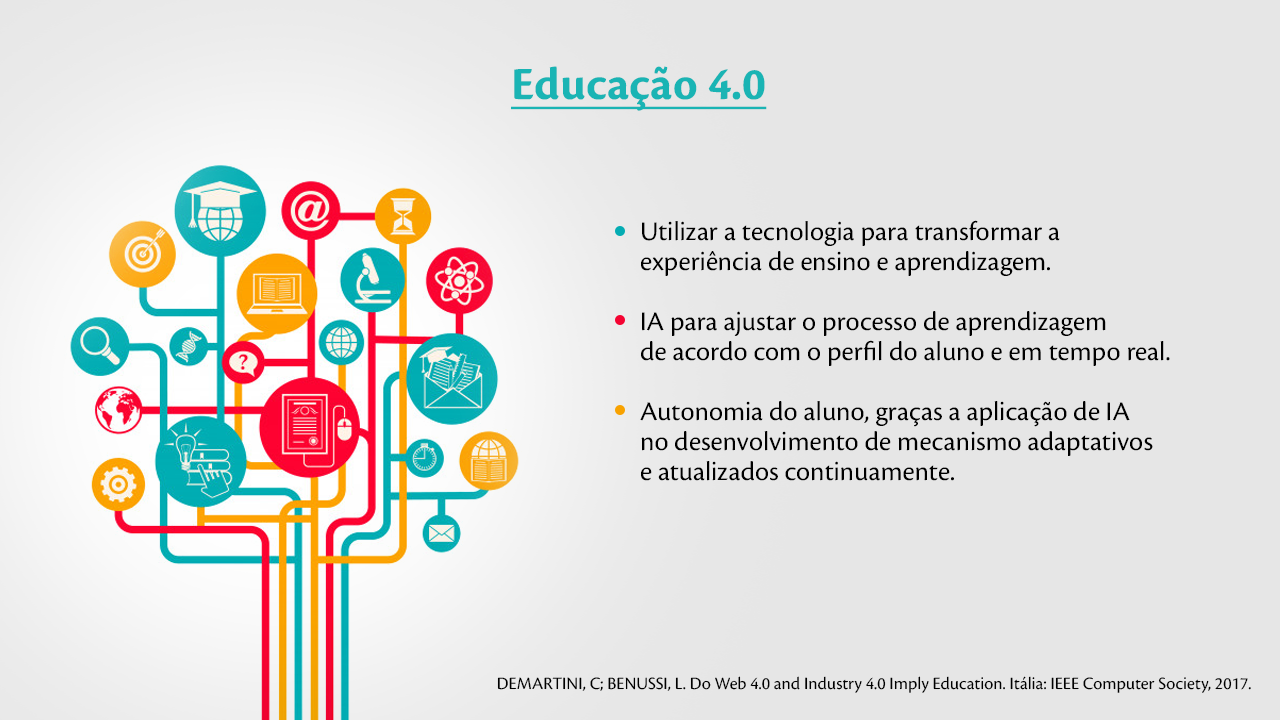
<style>
.page{position:relative;width:1280px;height:720px;background:#e6e6e6}
.page>*{position:absolute;margin:0}
.t1{font:48px "CronosPro-Bold";color:#1ab4b4;text-decoration:underline}
.t2{font:28px/30px "CronosPro-Regular";color:#000000}
.t3{font:18px "CronosPro-Regular";color:#000000}
</style>
<div class="page">
<p class="t1" style="left:511px;top:66px;width:256px;height:45px">Educação 4.0</p>
<p class="t2" style="left:640px;top:220px;width:530px;height:261px">Utilizar a tecnologia para transformar a experiência de ensino e aprendizagem.<br><br>IA para ajustar o processo de aprendizagem <br>de acordo com o perfil do aluno e em tempo real.<br><br>Autonomia do aluno, graças a aplicação de IA <br>no desenvolvimento de mecanismo adaptativos <br>e atualizados continuamente.</p>
<p class="t3" style="left:497px;top:676px;width:754px;height:17px">DEMARTINI, C; BENUSSI, L. Do Web 4.0 and Industry 4.0 Imply Education. Itália: IEEE Computer Society, 2017.</p>
</div>
